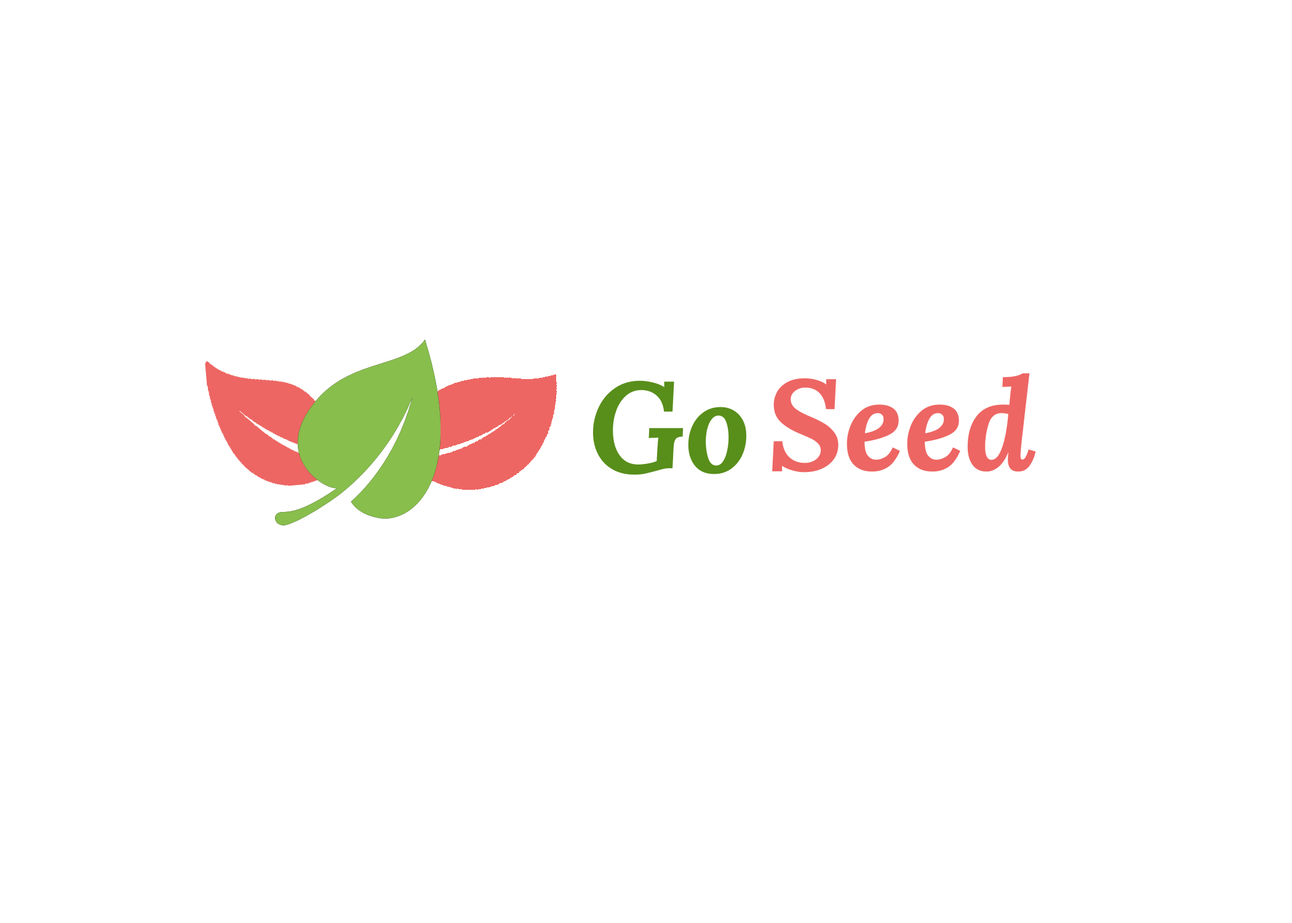
<style>
.page{position:relative;width:1292px;height:923px;background:#ffffff}
.page>*{position:absolute;margin:0}
.t1{font:128.2px "Lora-BoldItalic";color:#ed6663}
.t2{font:128.2px "Lora-BoldItalic";color:#588e1a}
</style>
<div class="page">
<p class="t1" style="left:772px;top:373px;width:264px;height:100px">Seed</p>
<p class="t2" style="left:592px;top:380px;width:154px;height:95px">Go</p>
</div>
